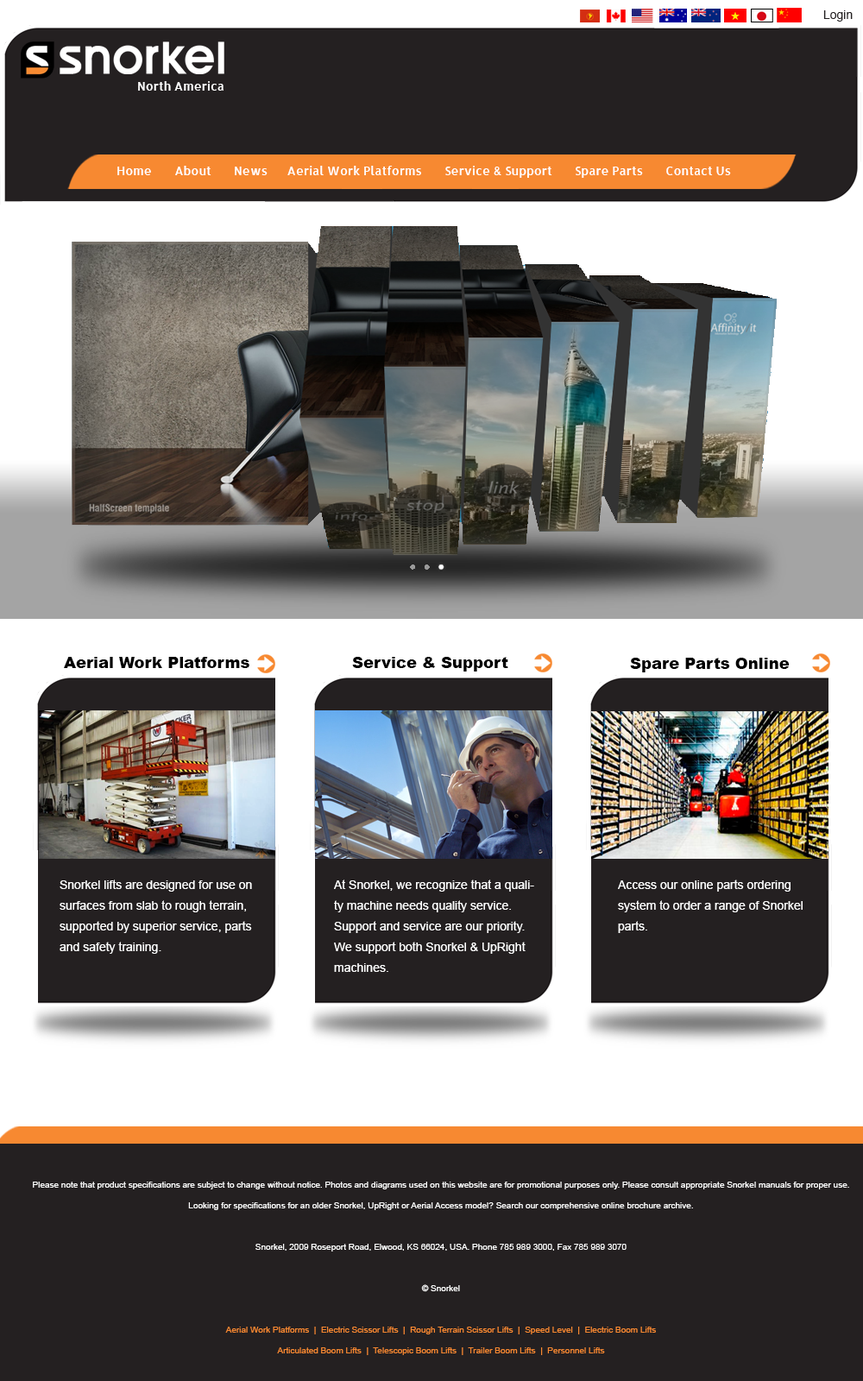
<style>
.page{position:relative;width:863px;height:1381px;background:#242021}
.page>*{position:absolute;margin:0}
.t1{font:12.1px "ArialMT";color:#242021}
.t2{font:12.1px "Allerta-Medium";color:#ffffff}
.t3{font:15.5px "Arial-Black";color:#000000}
.t4{font:12.1px/20.7px "ArialMT";color:#ffffff}
.t5{font:8.6px/20.7px "ArialMT";color:#ffffff}
.t6{font:8.6px/20.7px "ArialMT";color:#f78931}
</style>
<div class="page">
<p class="t1" style="left:824px;top:10px;width:29px;height:12px">Login</p>
<p class="t2" style="left:138px;top:81px;width:86px;height:10px">North America</p>
<p class="t2" style="left:117px;top:166px;width:614px;height:12px">Home       About       News      Aerial Work Platforms       Service &amp; Support       Spare Parts       Contact Us</p>
<p class="t3" style="left:64px;top:657px;width:185px;height:11px">Aerial Work Platforms</p>
<p class="t3" style="left:352px;top:657px;width:156px;height:15px">Service &amp; Support</p>
<p class="t3" style="left:630px;top:658px;width:160px;height:15px">Spare Parts Online</p>
<p class="t4" style="left:60px;top:880px;width:192px;height:74px">Snorkel lifts are designed for use on surfaces from slab to rough terrain, supported by superior service, parts and safety training.</p>
<p class="t4" style="left:334px;top:880px;width:200px;height:92px">At Snorkel, we recognize that a quality machine needs quality service. Support and service are our priority. We support both Snorkel &amp; UpRight machines.</p>
<p class="t4" style="left:618px;top:880px;width:185px;height:53px">Access our online parts ordering system to order a range of Snorkel parts.</p>
<p class="t5" style="left:33px;top:1182px;width:816px;height:173px;text-align:center">Please note that product specifications are subject to change without notice. Photos and diagrams used on this website are for promotional purposes only. Please consult appropriate Snorkel manuals for proper use.<br>Looking for specifications for an older Snorkel, UpRight or Aerial Access model? Search our comprehensive online brochure archive.<br><br>Snorkel, 2009 Roseport Road, Elwood, KS 66024, USA. Phone 785 989 3000, Fax 785 989 3070<br><br>© Snorkel<br><br><span class="t6">Aerial Work Platforms  |  Electric Scissor Lifts  |  Rough Terrain Scissor Lifts  |  Speed Level  |  Electric Boom Lifts<br>Articulated Boom Lifts  |  Telescopic Boom Lifts  |  Trailer Boom Lifts  |  Personnel Lifts</span></p>
</div>
